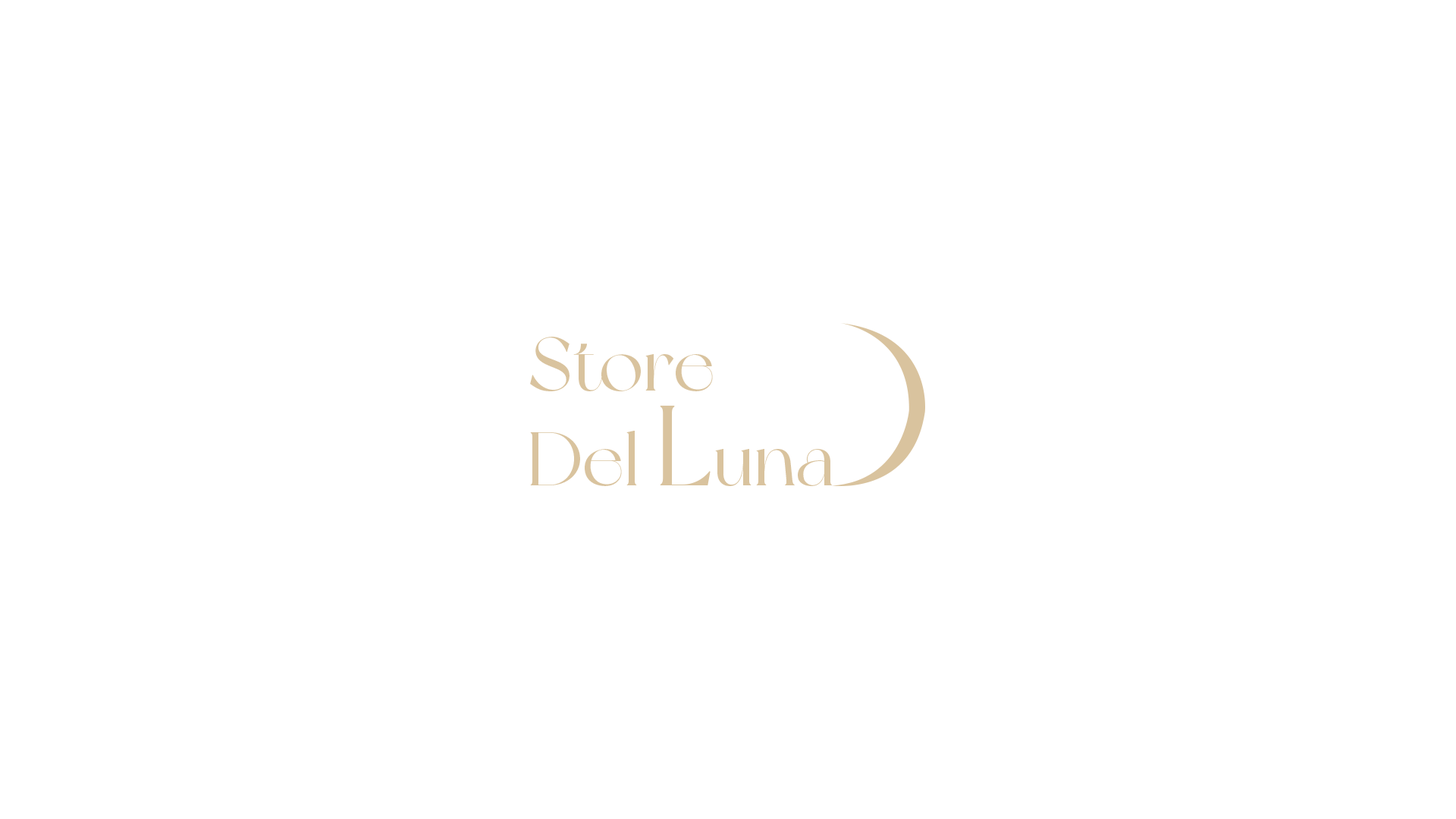
<style>
.page{position:relative;width:1456px;height:819px;background:#ffffff}
.page>*{position:absolute;margin:0}
.t1{font:75.8px/94.8px "NewYork";color:#d9c39e}
.t2{font:113.7px/94.8px "NewYork";color:#d9c39e}
</style>
<div class="page">
<p class="t1" style="left:530px;top:337px;width:303px;height:149px">Store<br>Del <span class="t2">L</span>una</p>
</div>
